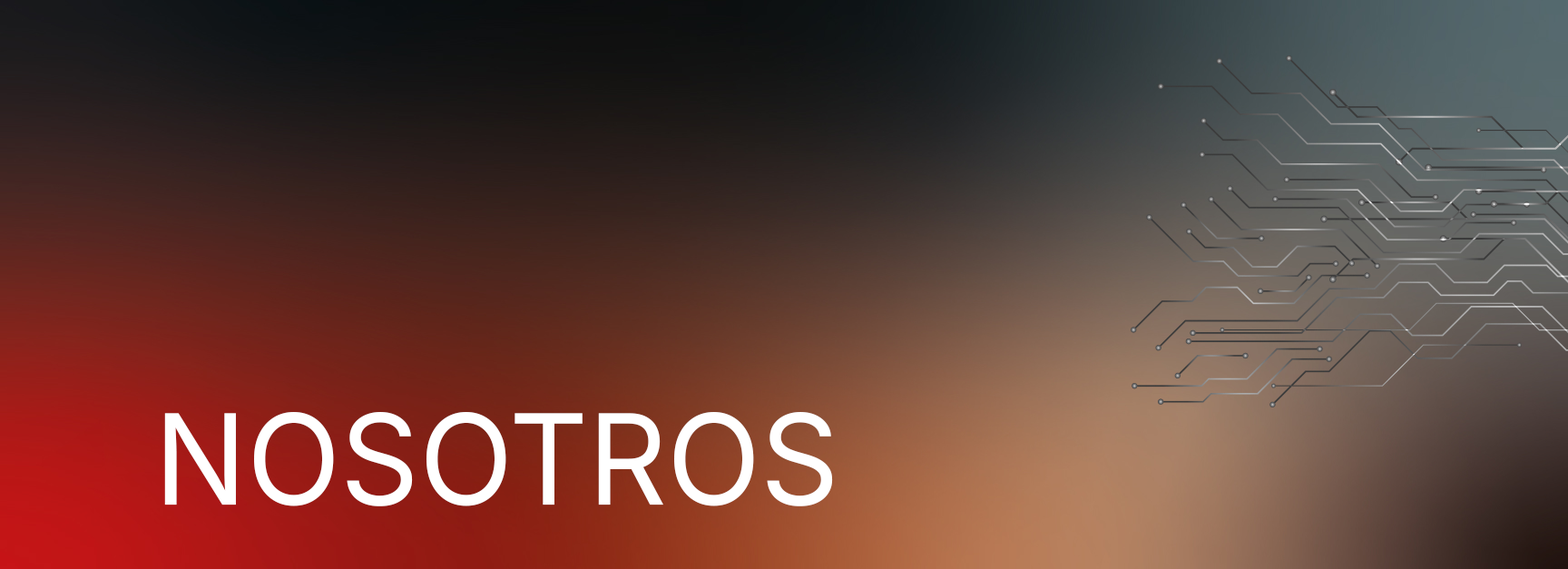
<style>
.page{position:relative;width:1568px;height:569px}
.page>*{position:absolute;margin:0}
.t1{font:125.5px "Inter-Regular";color:#ffffff}
</style>
<div class="page">
<p class="t1" style="left:164px;top:412px;width:669px;height:94px">NOSOTROS</p>
</div>
